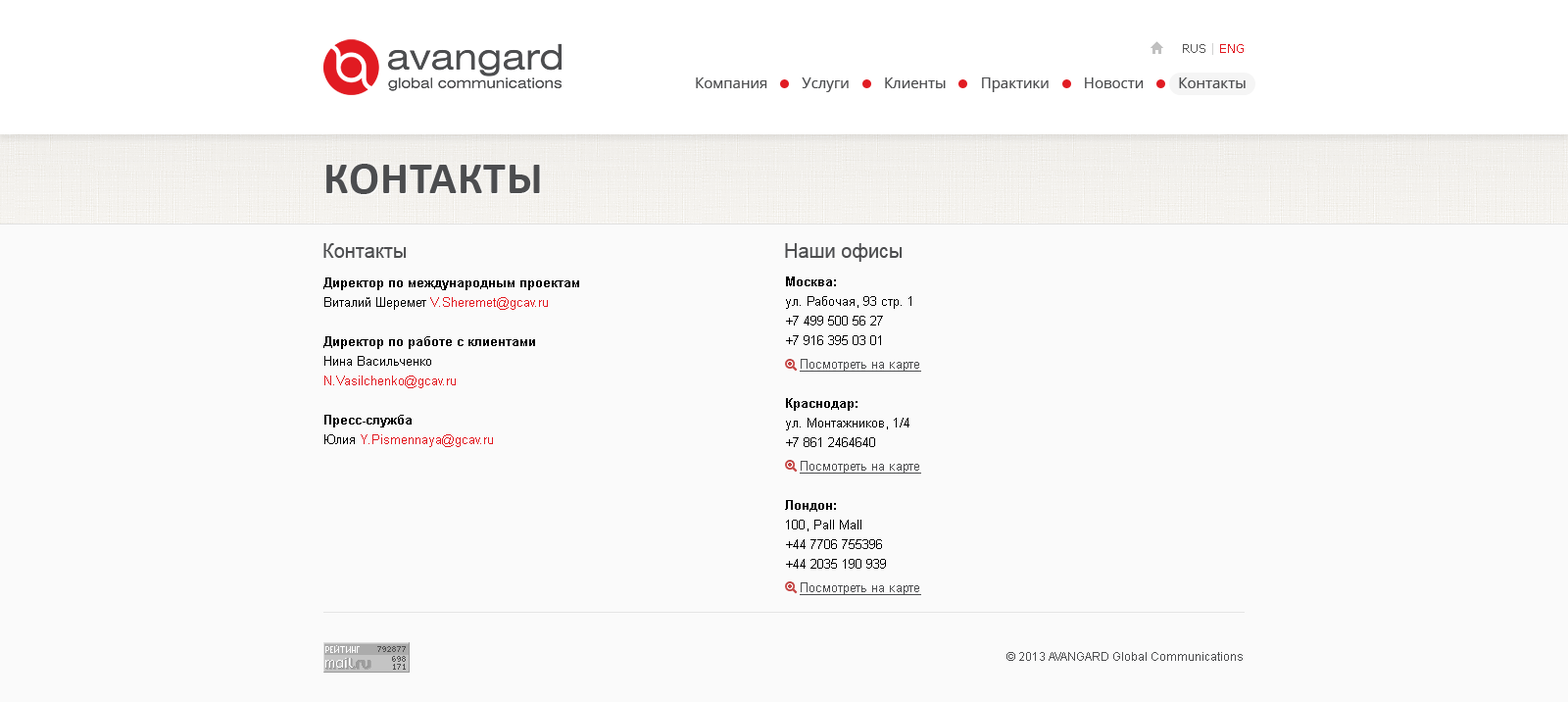
<style>
.page{position:relative;width:1568px;height:702px;background:#fafafa}
.page>*{position:absolute;margin:0}
.t1{font:11.8px "Verdana";color:#555555}
.t2{font:11.8px "Verdana";color:#d1d1d1}
.t3{font:11.8px "Verdana";color:#e11b22}
.t4{font:14.7px "OpenSans";color:#4c4d4f}
.t5{font:45.1px "Calibri-Bold";letter-spacing:0.02em;color:#4c4d4f;text-transform:uppercase}
.t6{font:19.6px "ArialMT";color:#4c4d4f}
.t7{font:12.7px/19.6px "Arial-BoldMT";color:#000000}
.t8{font:12.7px/19.6px "ArialMT";color:#000000}
.t9{font:12.7px/19.6px "ArialMT";color:#e11b22}
.t10{font:12.7px/23.5px "ArialMT";color:#4c4d4f;text-decoration:underline}
.t11{font:11.8px "ArialMT";color:#4c4d4f}
</style>
<div class="page">
<p class="t1" style="left:1183px;top:43px;width:61px;height:12px">RUS<span class="t2"> | </span><span class="t3">ENG</span></p>
<p class="t4" style="left:696px;top:77px;width:550px;height:15px">Компания         Услуги         Клиенты         Практики         Новости         Контакты</p>
<p class="t5" style="left:326px;top:164px;width:214px;height:30px">контакты</p>
<p class="t6" style="left:323px;top:243px;width:84px;height:15px">Контакты</p>
<p class="t6" style="left:785px;top:243px;width:118px;height:19px">Наши офисы</p>
<p class="t7" style="left:323px;top:277px;width:256px;height:170px">Директор по международным проектам <br><span class="t8">Виталий Шеремет </span><span class="t9">V.Sheremet@gcav.ru<br></span><br>Директор по работе с клиентами <br><span class="t8">Нина Васильченко <br></span><span class="t9">N.Vasilchenko@gcav.ru <br><br></span>Пресс-служба<br><span class="t8">Юлия </span><span class="t9">Y.Pismennaya@gcav.ru</span></p>
<p class="t8" style="left:785px;top:276px;width:136px;height:319px"><span class="t7">Москва:<br></span>ул. Рабочая, 93 стр. 1<br>+7 499 500 56 27<br>+7 916 395 03 01<br><span class="t10">Посмотреть на карте<br> <br></span><span class="t7">Краснодар:<br></span>ул. Монтажников, 1/4<br>+7 861 2464640<br><span class="t10">Посмотреть на карте<br><br></span><span class="t7">Лондон:<br></span>100, Pall Mall<br>+44 7706 755396<br>+44 2035 190 939<br><span class="t10">Посмотреть на карте</span></p>
<p class="t11" style="left:1006px;top:652px;width:237px;height:9px">© 2013 AVANGARD Global Communications</p>
</div>
